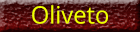
<style>
.page{position:relative;width:140px;height:32px}
.page>*{position:absolute;margin:0}
.t1{font:23.9px "OpenSans";color:#f0ff00}
</style>
<div class="page">
<p class="t1" style="left:32px;top:5px;width:76px;height:19px">Oliveto</p>
</div>
